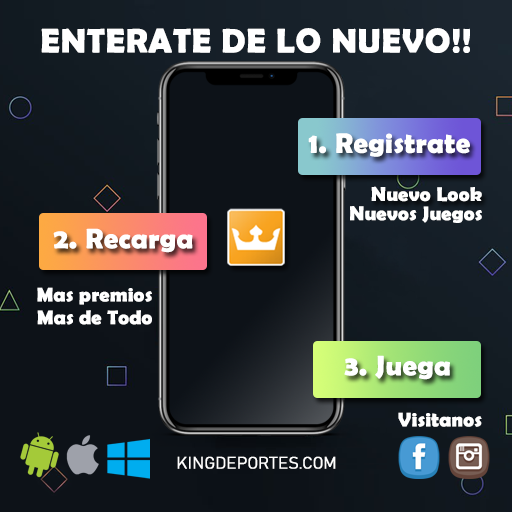
<style>
.page{position:relative;width:512px;height:512px;background:#0d1218}
.page>*{position:absolute;margin:0}
.t1{font:34px "BerlinSansFBDemi-Bold";color:#ffffff;font-weight:bold}
.t2{font:28.1px "BerlinSansFBDemi-Bold";color:#ffffff;font-weight:bold}
.t3{font:19.8px "BerlinSansFBDemi-Bold";color:#ffffff;font-weight:bold}
.t4{font:16.5px "Bahnschrift";color:#ffffff;font-weight:bold}
</style>
<div class="page">
<p class="t1" style="left:41px;top:28px;width:429px;height:25px">ENTERATE DE LO NUEVO!!</p>
<p class="t2" style="left:308px;top:133px;width:162px;height:24px">1. Registrate</p>
<p class="t3" style="left:371px;top:186px;width:111px;height:16px">Nuevo Look</p>
<p class="t3" style="left:350px;top:206px;width:132px;height:17px">Nuevos Juegos</p>
<p class="t2" style="left:53px;top:228px;width:140px;height:25px">2. Recarga</p>
<p class="t3" style="left:37px;top:287px;width:115px;height:18px">Mas premios</p>
<p class="t3" style="left:37px;top:310px;width:115px;height:15px">Mas de Todo</p>
<p class="t2" style="left:344px;top:355px;width:106px;height:25px">3. Juega</p>
<p class="t3" style="left:398px;top:412px;width:84px;height:15px">Visitanos</p>
<p class="t4" style="left:177px;top:456px;width:159px;height:13px">KINGDEPORTES.COM</p>
</div>
